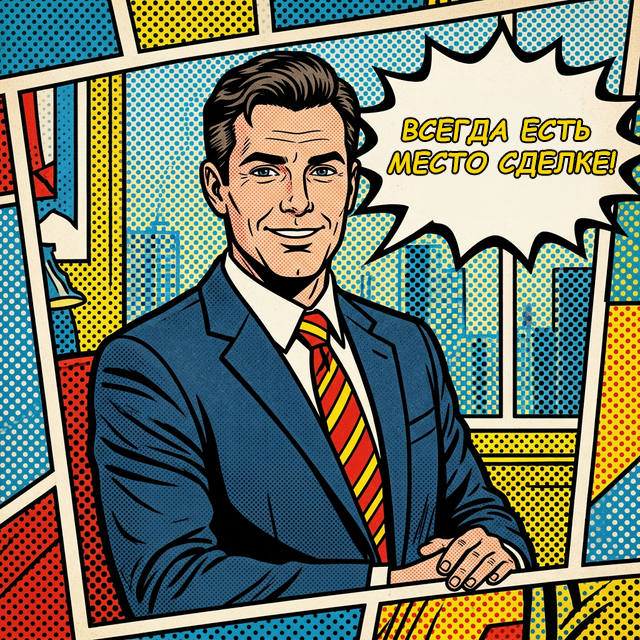
<style>
.page{position:relative;width:640px;height:640px}
.page>*{position:absolute;margin:0}
.t1{font:27px "ComicSansMS-BoldItalic";letter-spacing:0.01em;color:#f8d70a;text-transform:uppercase}
</style>
<div class="page">
<p class="t1" style="left:388px;top:118px;width:228px;height:59px;text-align:center">Всегда есть <br>место сделке!</p>
</div>
